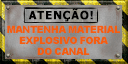
<style>
.page{position:relative;width:128px;height:64px}
.page>*{position:absolute;margin:0}
.t1{font:11px "Tahoma-Bold";letter-spacing:0.08em;color:#000000;font-weight:bold}
.t2{font:10px/11px "Arial-Black";letter-spacing:-0.1em;color:#f35e10;text-transform:uppercase}
</style>
<div class="page">
<p class="t1" style="left:28px;top:8px;width:65px;height:14px">ATENÇÃO!</p>
<p class="t2" style="left:7px;top:25px;width:113px;height:30px;text-align:center">Mantenha material<br>explosivo fora<br>do canal</p>
</div>
